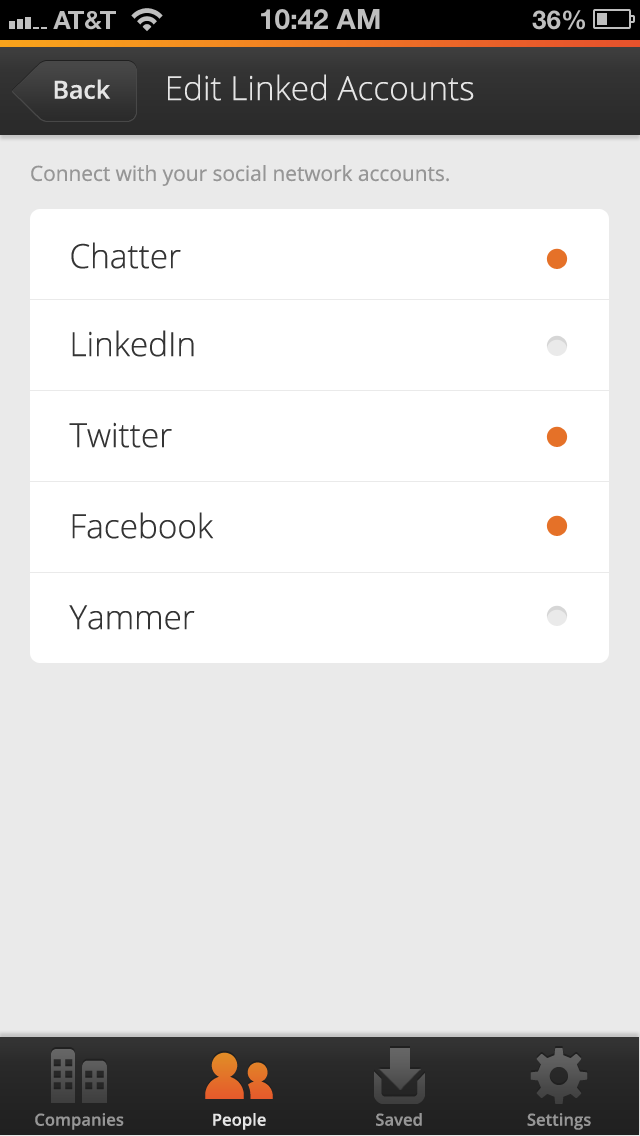
<style>
.page{position:relative;width:640px;height:1136px;background:#eaeaea}
.page>*{position:absolute;margin:0}
.t1{font:33.3px "OpenSans-Light";color:#e5e5e5}
.t2{font:25px "OpenSans-Semibold";color:#e5e5e5}
.t3{font:20.8px "OpenSans";color:#969696}
.t4{font:33.3px "OpenSans-Light";color:#343434}
.t5{font:16.7px "OpenSans-Semibold";color:#969696}
.t6{font:16.7px "OpenSans-Semibold";color:#e5e5e5}
</style>
<div class="page">
<p class="t1" style="left:168px;top:74px;width:306px;height:27px">Edit Linked Accounts</p>
<p class="t2" style="left:54px;top:79px;width:57px;height:20px">Back</p>
<p class="t3" style="left:31px;top:165px;width:418px;height:21px">Connect with your social network accounts.</p>
<p class="t4" style="left:71px;top:242px;width:110px;height:27px">Chatter</p>
<p class="t4" style="left:72px;top:330px;width:122px;height:27px">LinkedIn</p>
<p class="t4" style="left:69px;top:422px;width:103px;height:26px">Twitter</p>
<p class="t4" style="left:72px;top:512px;width:142px;height:27px">Facebook</p>
<p class="t4" style="left:69px;top:605px;width:126px;height:25px">Yammer</p>
<p class="t5" style="left:35px;top:1113px;width:89px;height:17px">Companies</p>
<p class="t6" style="left:213px;top:1113px;width:53px;height:17px">People</p>
<p class="t5" style="left:376px;top:1113px;width:46px;height:13px">Saved</p>
<p class="t5" style="left:527px;top:1113px;width:64px;height:17px">Settings</p>
</div>
